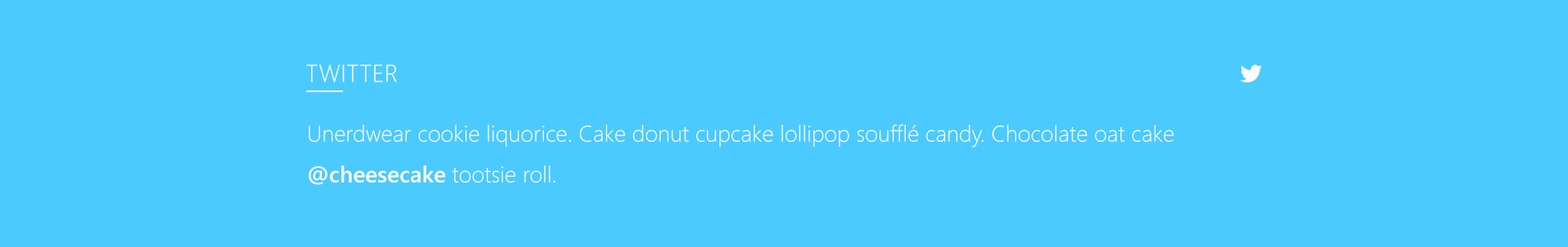
<style>
.page{position:relative;width:1568px;height:247px;background:#4bcaff}
.page>*{position:absolute;margin:0}
.t1{font:24.5px "SegoeUI-Light";color:#ffffff;text-transform:uppercase}
.t2{font:22.9px/40.8px "SegoeUI-Light";color:#ffffff}
.t3{font:22.9px/40.8px "SegoeUI-SemiBold";color:#ffffff}
</style>
<div class="page">
<p class="t1" style="left:306px;top:65px;width:91px;height:17px">twitter</p>
<p class="t2" style="left:309px;top:124px;width:865px;height:61px">Unerdwear cookie liquorice. Cake donut cupcake lollipop soufflé candy. Chocolate oat cake <span class="t3">@cheesecake</span> tootsie roll.</p>
</div>
